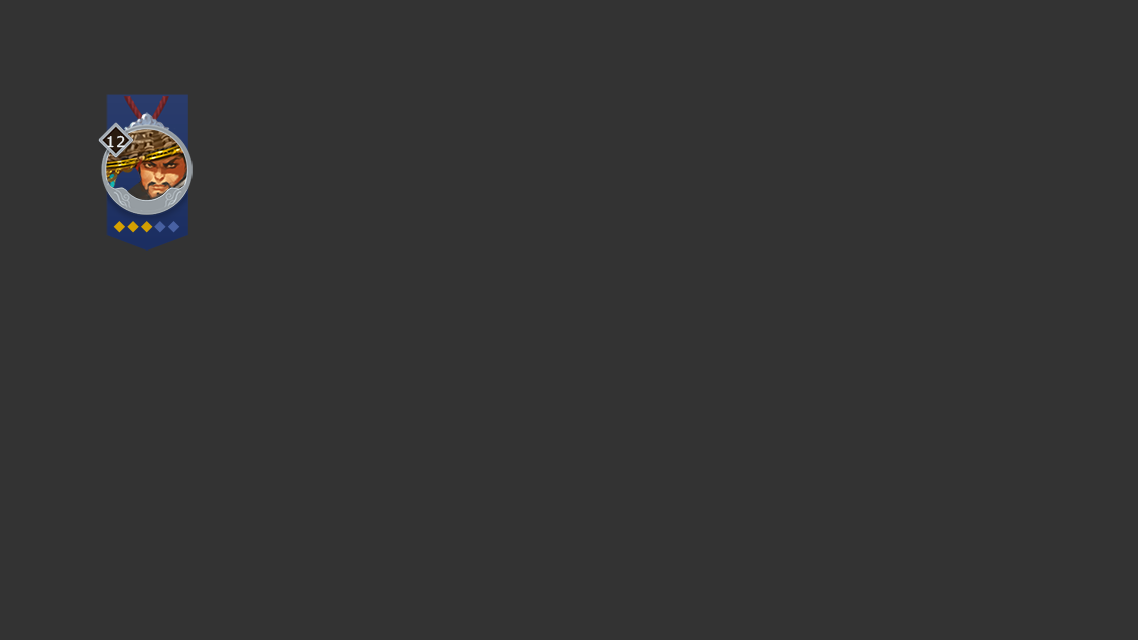
<style>
.page{position:relative;width:1138px;height:640px;background:#333333}
.page>*{position:absolute;margin:0}
.t1{font:14.5px "Meiryo";letter-spacing:0.1em;color:#eff3f4}
</style>
<div class="page">
<p class="t1" style="left:107px;top:135px;width:18px;height:13px">12</p>
</div>
